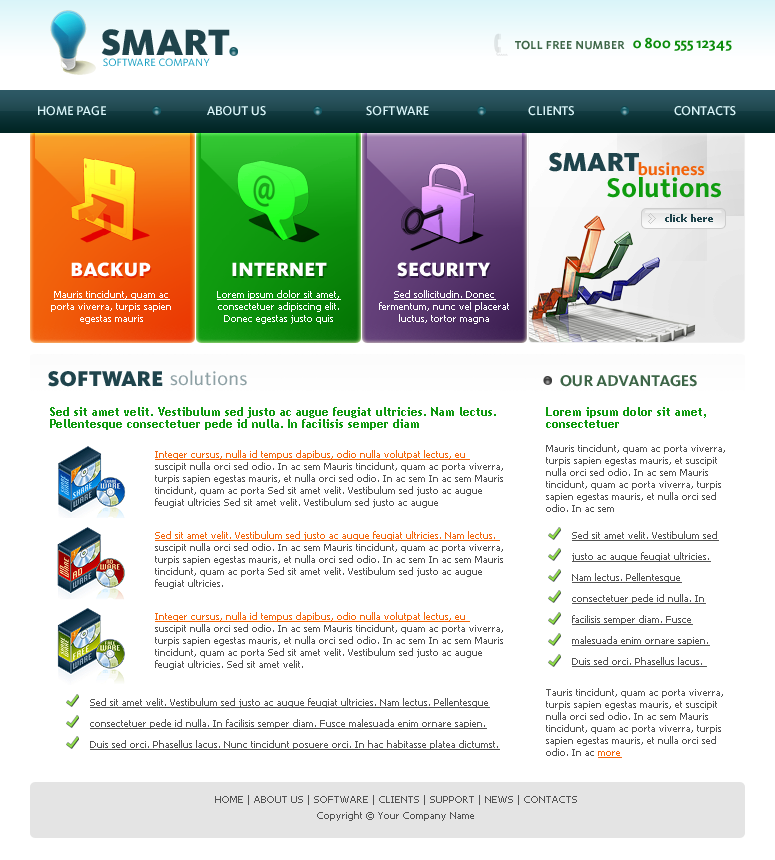
<style>
.page{position:relative;width:775px;height:860px;background:#ffffff}
.page>*{position:absolute;margin:0}
.t1{font:38px "Kievit-Black";color:#1f444c}
.t2{font:12px "Kievit-Bold";color:#3d6547}
.t3{font:15px "Kievit-Bold";color:#0b8c0b}
.t4{font:11px "Kievit-Regular";color:#169ec1}
.t5{font:13px "Kievit-Medium";color:#daf5f9}
.t6{font:27px "Kievit-Black";color:#1f444c}
.t7{font:18px "Kievit-Bold";color:#f2630b}
.t8{font:28px "Kievit-Bold";color:#0f9c0f}
.t9{font:10px "Tahoma-Bold";color:#1f444c}
.t10{font:20px "Kievit-Black";color:#ffffff}
.t11{font:10px/12px "Tahoma";color:#ffffff}
.t12{font:10px/12px "Tahoma";color:#ffffff;text-decoration:underline}
.t13{font:22px "Kievit-Black";color:#1f444c}
.t14{font:20px "Kievit-Book";color:#8ea1a5}
.t15{font:16px "Kievit-Bold";color:#3d6547}
.t16{font:12px/12px "TrebuchetMS-Bold";color:#0f990f}
.t17{font:10px/12px "Tahoma";color:#535353}
.t18{font:10px/12px "Tahoma";color:#f2660c;text-decoration:underline}
.t19{font:10px/21px "Tahoma";color:#535353;text-decoration:underline}
.t20{font:10px/16px "Tahoma";color:#535353}
</style>
<div class="page">
<p class="t1" style="left:101px;top:29px;width:129px;height:27px">SMART</p>
<p class="t2" style="left:515px;top:40px;width:110px;height:10px">TOLL FREE NUMBER</p>
<p class="t3" style="left:633px;top:37px;width:99px;height:14px">0 800 555 12345</p>
<p class="t4" style="left:103px;top:58px;width:107px;height:9px">SOFTWARE COMPANY</p>
<p class="t5" style="left:38px;top:106px;width:68px;height:10px">HOME PAGE</p>
<p class="t5" style="left:207px;top:106px;width:59px;height:10px">ABOUT US</p>
<p class="t5" style="left:366px;top:106px;width:63px;height:10px">SOFTWARE</p>
<p class="t5" style="left:528px;top:106px;width:46px;height:10px">CLIENTS</p>
<p class="t5" style="left:674px;top:106px;width:62px;height:10px">CONTACTS</p>
<p class="t6" style="left:549px;top:152px;width:90px;height:20px">SMART</p>
<p class="t7" style="left:638px;top:162px;width:67px;height:14px">business</p>
<p class="t8" style="left:607px;top:177px;width:114px;height:21px">Solutions</p>
<p class="t9" style="left:665px;top:214px;width:48px;height:8px">click here</p>
<p class="t10" style="left:71px;top:262px;width:80px;height:15px">BACKUP</p>
<p class="t10" style="left:232px;top:262px;width:95px;height:14px">INTERNET</p>
<p class="t10" style="left:397px;top:262px;width:93px;height:15px">SECURITY</p>
<p class="t11" style="left:51px;top:290px;width:120px;height:34px;text-align:center"><span class="t12">Mauris tincidunt, quam ac </span>porta viverra, turpis sapien egestas mauris</p>
<p class="t11" style="left:217px;top:290px;width:124px;height:34px;text-align:center"><span class="t12">Lorem ipsum dolor sit amet, </span>consectetuer adipiscing elit. Donec egestas justo quis</p>
<p class="t11" style="left:379px;top:290px;width:130px;height:34px;text-align:center"><span class="t12">Sed sollicitudin. Donec </span>fermentum, nunc vel placerat luctus, tortor magna</p>
<p class="t13" style="left:48px;top:371px;width:115px;height:16px">SOFTWARE</p>
<p class="t14" style="left:170px;top:370px;width:77px;height:16px">solutions</p>
<p class="t15" style="left:560px;top:375px;width:137px;height:12px">OUR ADVANTAGES</p>
<p class="t16" style="left:50px;top:407px;width:446px;height:23px">Sed sit amet velit. Vestibulum sed justo ac augue feugiat ultricies. Nam lectus. Pellentesque consectetuer pede id nulla. In facilisis semper diam</p>
<p class="t17" style="left:546px;top:407px;width:179px;height:105px"><span class="t16">Lorem ipsum dolor sit amet, consectetuer <br><br></span>Mauris tincidunt, quam ac porta viverra, turpis sapien egestas mauris, et suscipit nulla orci sed odio. In ac sem Mauris tincidunt, quam ac porta viverra, turpis sapien egestas mauris, et nulla orci sed odio. In ac sem</p>
<p class="t17" style="left:155px;top:450px;width:348px;height:58px"><span class="t18">Integer cursus, nulla id tempus dapibus, odio nulla volutpat lectus, eu <br></span>suscipit nulla orci sed odio. In ac sem Mauris tincidunt, quam ac porta viverra, turpis sapien egestas mauris, et nulla orci sed odio. In ac sem In ac sem Mauris tincidunt, quam ac porta Sed sit amet velit. Vestibulum sed justo ac augue feugiat ultricies Sed sit amet velit. Vestibulum sed justo ac augue</p>
<p class="t17" style="left:155px;top:531px;width:348px;height:58px"><span class="t18">Sed sit amet velit. Vestibulum sed justo ac augue feugiat ultricies. Nam lectus. <br></span>suscipit nulla orci sed odio. In ac sem Mauris tincidunt, quam ac porta viverra, turpis sapien egestas mauris, et nulla orci sed odio. In ac sem In ac sem Mauris tincidunt, quam ac porta Sed sit amet velit. Vestibulum sed justo ac augue feugiat ultricies.</p>
<p class="t19" style="left:572px;top:531px;width:147px;height:136px">Sed sit amet velit. Vestibulum sed justo ac augue feugiat ultricies. Nam lectus. Pellentesque consectetuer pede id nulla. In facilisis semper diam. Fusce malesuada enim ornare sapien. Duis sed orci. Phasellus lacus.</p>
<p class="t17" style="left:155px;top:612px;width:348px;height:58px"><span class="t18">Integer cursus, nulla id tempus dapibus, odio nulla volutpat lectus, eu <br></span>suscipit nulla orci sed odio. In ac sem Mauris tincidunt, quam ac porta viverra, turpis sapien egestas mauris, et nulla orci sed odio. In ac sem In ac sem Mauris tincidunt, quam ac porta Sed sit amet velit. Vestibulum sed justo ac augue feugiat ultricies. Sed sit amet velit.</p>
<p class="t17" style="left:546px;top:688px;width:177px;height:70px">Tauris tincidunt, quam ac porta viverra, turpis sapien egestas mauris, et suscipit nulla orci sed odio. In ac sem Mauris tincidunt, quam ac porta viverra, turpis sapien egestas mauris, et nulla orci sed odio. In ac <span class="t18">more</span></p>
<p class="t19" style="left:90px;top:698px;width:410px;height:52px">Sed sit amet velit. Vestibulum sed justo ac augue feugiat ultricies. Nam lectus. Pellentesque consectetuer pede id nulla. In facilisis semper diam. Fusce malesuada enim ornare sapien. Duis sed orci. Phasellus lacus. Nunc tincidunt posuere orci. In hac habitasse platea dictumst.</p>
<p class="t20" style="left:215px;top:795px;width:362px;height:26px;text-align:center">HOME | ABOUT US | SOFTWARE | CLIENTS | SUPPORT | NEWS | CONTACTS<br>Copyright © Your Company Name</p>
</div>
